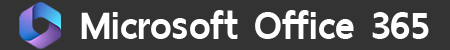
<style>
.page{position:relative;width:450px;height:50px;background:#333333}
.page>*{position:absolute;margin:0}
.t1{font:50px "ThaiSansNeue-ExtraBold";color:#ffffff}
</style>
<div class="page">
<p class="t1" style="left:81px;top:10px;width:348px;height:29px">Microsoft Office 365</p>
</div>
